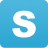
<style>
.page{position:relative;width:48px;height:48px}
.page>*{position:absolute;margin:0}
.t1{font:36px "Arial-Black";color:#ffffff;text-transform:uppercase}
</style>
<div class="page">
<p class="t1" style="left:12px;top:10px;width:24px;height:28px">S</p>
</div>
